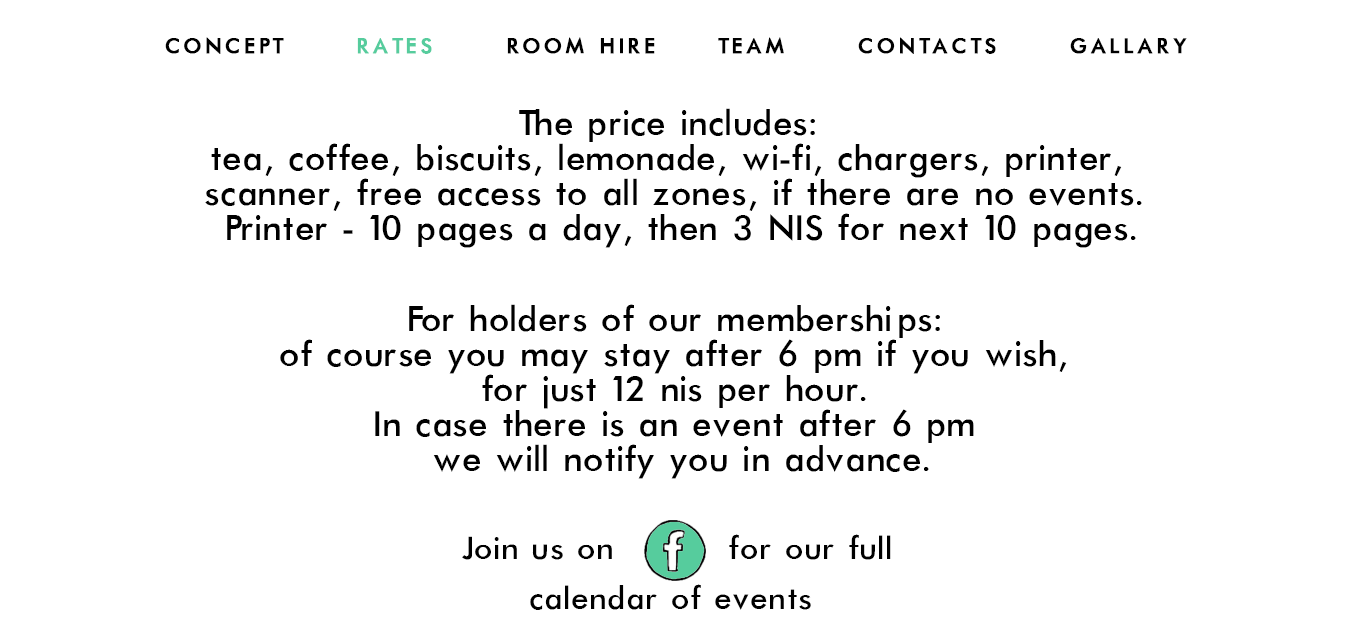
<style>
.page{position:relative;width:1351px;height:638px;background:#ffffff}
.page>*{position:absolute;margin:0}
.t1{font:24px "Futura-Normal";letter-spacing:0.12em;color:#000000;text-transform:uppercase;font-weight:bold}
.t2{font:24px "Futura-Normal";letter-spacing:0.12em;color:#56cc9d;text-transform:uppercase;font-weight:bold}
.t3{font:40px/35px "Futura-Normal";color:#000000}
.t4{font:36px/50px "Futura-Normal";letter-spacing:0.01em;color:#000000}
</style>
<div class="page">
<p class="t1" style="left:165px;top:37px;width:1022px;height:17px">concept      <span class="t2">rates</span>      room hire     team      contacts      gallary</p>
<p class="t3" style="left:205px;top:108px;width:937px;height:140px;text-align:center">The price includes: <br>tea, coffee, biscuits, lemonade, wi-fi, chargers, printer, <br>scanner, free access to all zones, if there are no events.<br> Printer - 10 pages a day, then 3 NIS for next 10 pages.</p>
<p class="t3" style="left:280px;top:304px;width:787px;height:175px;text-align:center">For holders of our memberships: <br>of course you may stay after 6 pm if you wish, <br>for just 12 nis per hour. <br>In case there is an event after 6 pm <br>we will notify you in advance.</p>
<p class="t4" style="left:462px;top:534px;width:429px;height:76px;text-align:center">Join us on         for our full<br>calendar of events</p>
</div>
